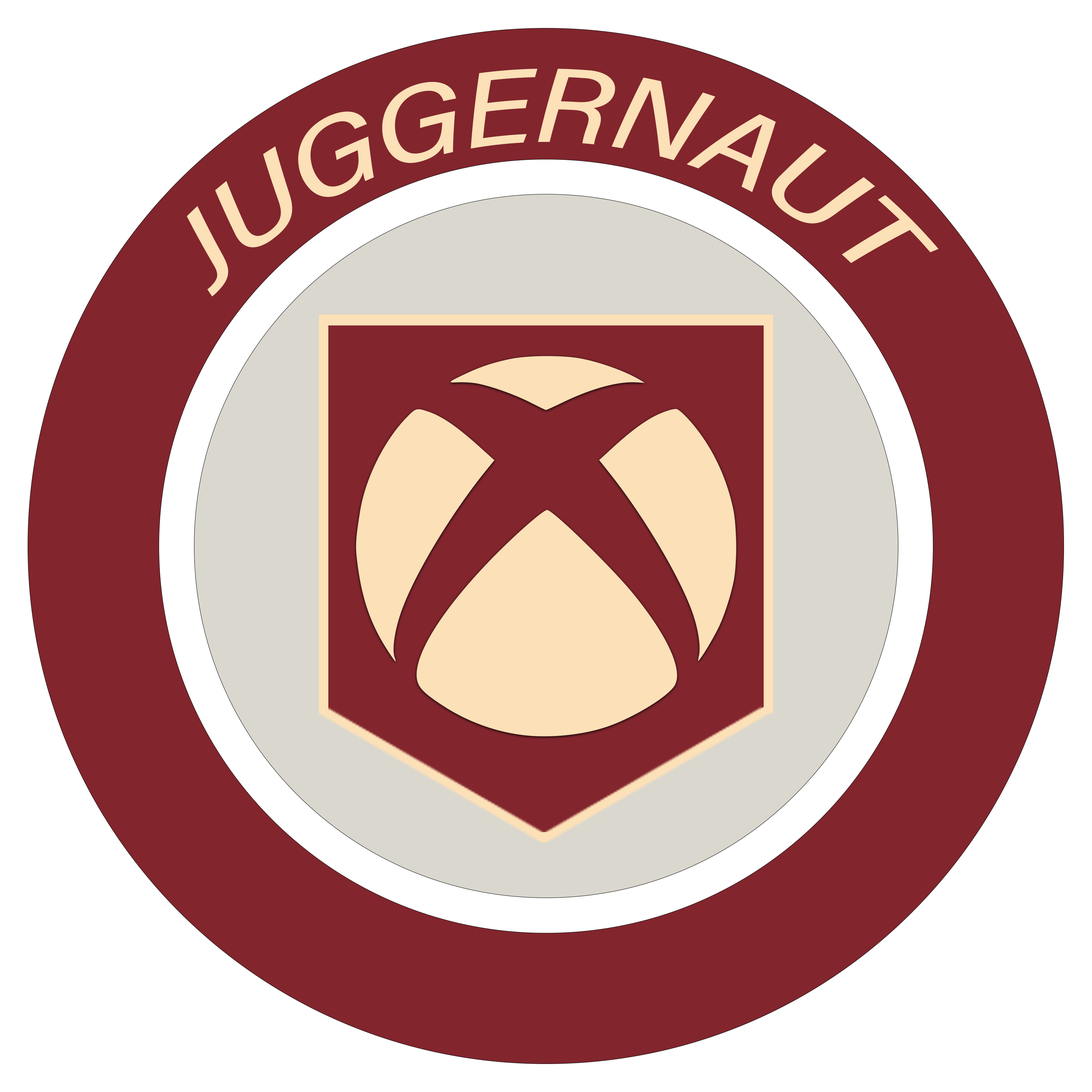
<style>
.page{position:relative;width:1092px;height:1092px;background:#82252d}
.page>*{position:absolute;margin:0}
.t1{font:106.2px "AcuminConcept-SemiCondensedMediumItalic";color:#fce0b7}
</style>
<div class="page">
<p class="t1" style="left:187px;top:68px;width:752px;height:229px">JUGGERNAUT</p>
</div>
